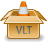
<style>
.page{position:relative;width:48px;height:48px;background:#ffffff}
.page>*{position:absolute;margin:0}
.t1{font:12px "Delicious-Roman";color:#676964}
</style>
<div class="page">
<p class="t1" style="left:16px;top:26px;width:16px;height:8px">VLT</p>
</div>
